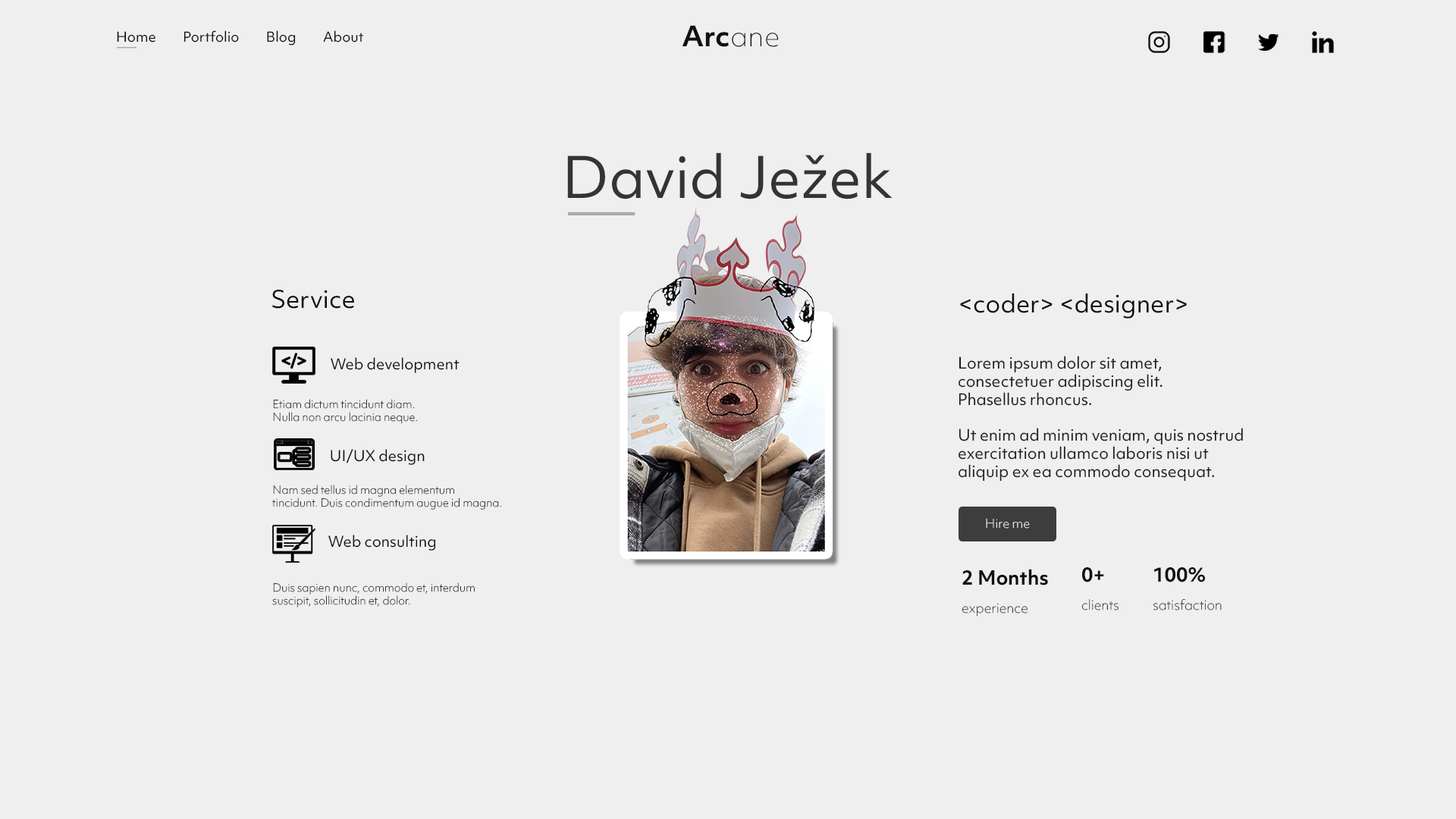
<style>
.page{position:relative;width:1456px;height:819px;background:#efefef}
.page>*{position:absolute;margin:0}
.t1{font:27.3px "ObjektivMk1-Bold";color:#111111}
.t2{font:27.3px "ObjektivMk1-Thin";color:#111111}
.t3{font:13.3px "ObjektivMk1-Regular";color:#111111}
.t4{font:14.9px "ObjektivMk1-Regular";color:#aaaaaa;scale:1.31 1}
.t5{font:55.3px "ObjektivMk1-Regular";color:#343434}
.t6{font:40.3px "ObjektivMk1-Regular";color:#aaaaaa;scale:1.66 1}
.t7{font:23.4px "ObjektivMk1-Regular";color:#101010}
.t8{font:14.3px "ObjektivMk1-Regular";color:#101010}
.t9{font:15.1px "ObjektivMk1-Regular";color:#1b1b1b}
.t10{font:10.5px "ObjektivMk1-Thin";color:#3a3a3a}
.t11{font:12.8px "ObjektivMk1-Thin";color:#212121}
.t12{font:18.9px "ObjektivMk1-Bold";color:#111111}
</style>
<div class="page">
<p class="t1" style="left:682px;top:25px;width:97px;height:22px">Arc<span class="t2">ane</span></p>
<p class="t3" style="left:117px;top:30px;width:246px;height:15px">Home         Portfolio         Blog         About</p>
<p class="t4" style="left:117px;top:47px;width:19px;height:2px">__</p>
<p class="t5" style="left:567px;top:152px;width:326px;height:47px">David Ježek</p>
<p class="t6" style="left:568px;top:212px;width:67px;height:3px">__</p>
<p class="t7" style="left:272px;top:290px;width:82px;height:19px">Service</p>
<p class="t7" style="left:960px;top:293px;width:227px;height:25px">&lt;coder&gt; &lt;designer&gt;</p>
<p class="t8" style="left:331px;top:357px;width:129px;height:16px">Web development</p>
<p class="t9" style="left:959px;top:356px;width:284px;height:126px">Lorem ipsum dolor sit amet, <br>consectetuer adipiscing elit. <br>Phasellus rhoncus. <br><br>Ut enim ad minim veniam, quis nostrud <br>exercitation ullamco laboris nisi ut <br>aliquip ex ea commodo consequat.</p>
<p class="t10" style="left:273px;top:399px;width:144px;height:25px">Etiam dictum tincidunt diam. <br>Nulla non arcu lacinia neque.</p>
<p class="t8" style="left:331px;top:449px;width:94px;height:16px">UI/UX design</p>
<p class="t10" style="left:272px;top:485px;width:229px;height:25px">Nam sed tellus id magna elementum <br>tincidunt. Duis condimentum augue id magna.</p>
<p class="t8" style="left:328px;top:535px;width:108px;height:16px">Web consulting</p>
<p class="t11" style="left:962px;top:569px;width:86px;height:48px"><span class="t12">2 Months<br><br></span>experience</p>
<p class="t11" style="left:1081px;top:567px;width:38px;height:43px"><span class="t12">0+<br><br></span>clients</p>
<p class="t11" style="left:1153px;top:567px;width:69px;height:43px"><span class="t12">100%<br><br></span>satisfaction</p>
<p class="t10" style="left:272px;top:582px;width:203px;height:25px">Duis sapien nunc, commodo et, interdum <br>suscipit, sollicitudin et, dolor.</p>
</div>
